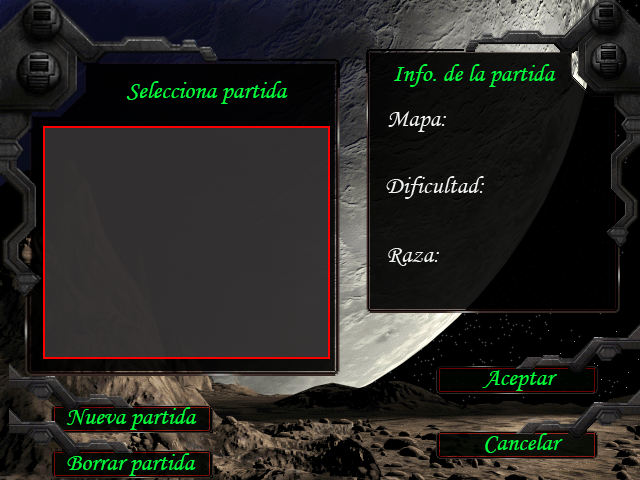
<style>
.page{position:relative;width:640px;height:480px}
.page>*{position:absolute;margin:0}
.t1{font:25px "MonotypeCorsiva";color:#00fc3b}
</style>
<div class="page">
<p class="t1" style="left:394px;top:64px;width:162px;height:23px">Info. de la partida</p>
<p class="t1" style="left:126px;top:81px;width:162px;height:23px">Selecciona partida</p>
<p class="t1" style="left:482px;top:370px;width:75px;height:21px">Aceptar</p>
<p class="t1" style="left:67px;top:407px;width:130px;height:23px">Nueva partida</p>
<p class="t1" style="left:485px;top:433px;width:78px;height:20px">Cancelar</p>
<p class="t1" style="left:67px;top:453px;width:129px;height:23px">Borrar partida</p>
</div>
